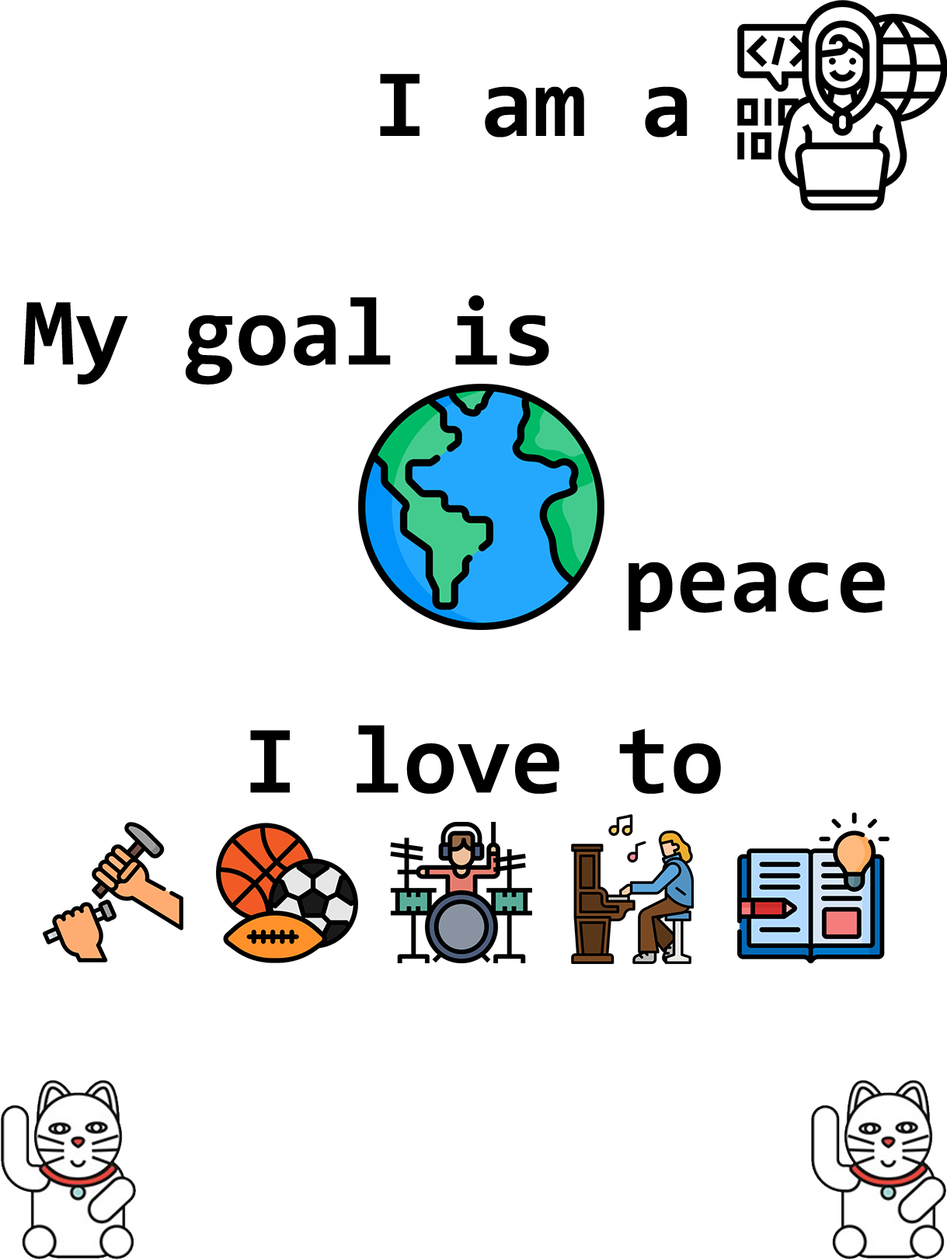
<style>
.page{position:relative;width:947px;height:1260px;background:#ffffff}
.page>*{position:absolute;margin:0}
.t1{font:97.1px "Consolas-Bold";color:#000000}
</style>
<div class="page">
<p class="t1" style="left:380px;top:74px;width:307px;height:63px">I am a</p>
<p class="t1" style="left:23px;top:295px;width:526px;height:89px">My goal is</p>
<p class="t1" style="left:628px;top:561px;width:257px;height:70px">peace</p>
<p class="t1" style="left:250px;top:725px;width:471px;height:69px">I love to</p>
</div>
